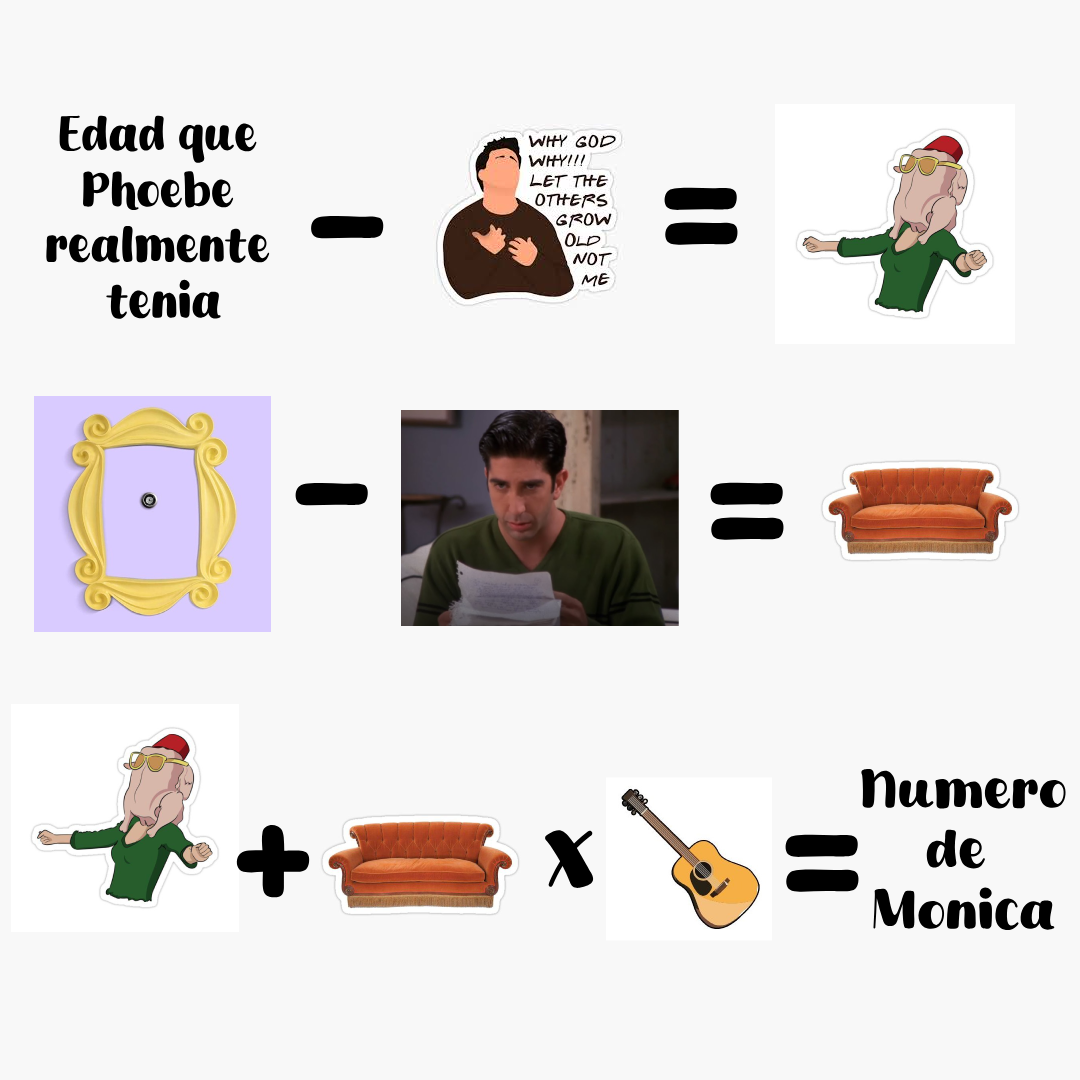
<style>
.page{position:relative;width:1080px;height:1080px;background:#f8f8f8}
.page>*{position:absolute;margin:0}
.t1{font:46.4px "Lemon-Shake-Shake";color:#000000;scale:0.9 1}
.t2{font:173.1px "Lemon-Shake-Shake";color:#000000}
.t3{font:50.4px "Lemon-Shake-Shake";color:#000000}
.t4{font:103.9px "Lemon-Shake-Shake";color:#000000}
</style>
<div class="page">
<p class="t1" style="left:46px;top:115px;width:224px;height:205px;text-align:center">Edad que <br>Phoebe <br>realmente <br>tenia</p>
<p class="t2" style="left:664px;top:187px;width:74px;height:58px">=</p>
<p class="t2" style="left:311px;top:216px;width:73px;height:23px">-</p>
<p class="t2" style="left:295px;top:483px;width:73px;height:23px">-</p>
<p class="t2" style="left:709px;top:482px;width:76px;height:58px">=</p>
<p class="t3" style="left:861px;top:769px;width:205px;height:161px;text-align:center">Numero<br>de <br>Monica</p>
<p class="t2" style="left:235px;top:823px;width:75px;height:75px">+</p>
<p class="t4" style="left:545px;top:830px;width:49px;height:58px">x</p>
<p class="t2" style="left:784px;top:834px;width:76px;height:58px">=</p>
</div>
